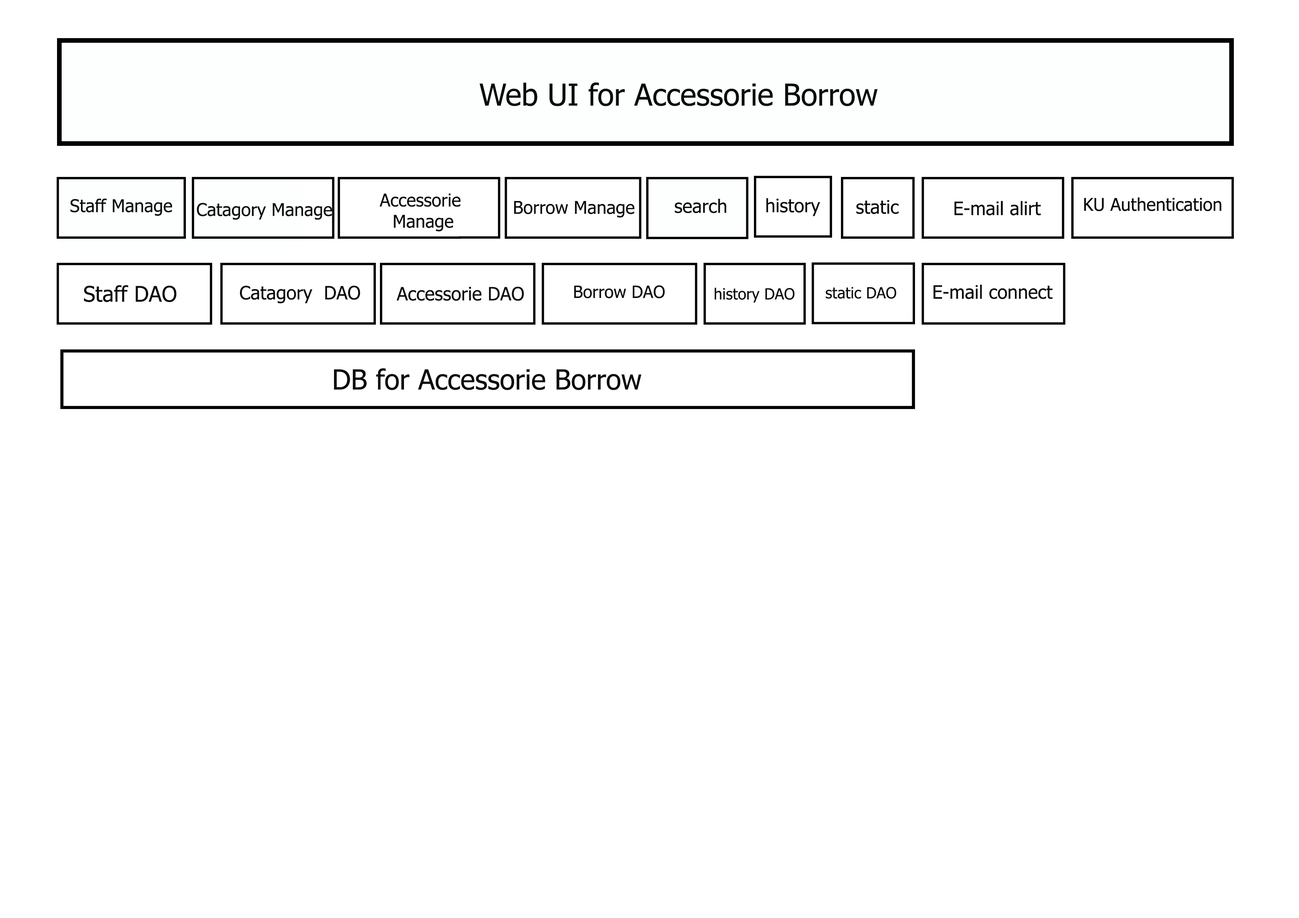
<style>
.page{position:relative;width:1299px;height:918px;background:#ffffff}
.page>*{position:absolute;margin:0}
.t1{font:30.2px "Tahoma";color:#0a0c0c}
.t2{font:17.6px "Tahoma";color:#0a0c0c}
.t3{font:18.5px "Tahoma";color:#0a0c0c}
.t4{font:21.6px "Tahoma";color:#0a0c0c}
.t5{font:4.4px "Tahoma";color:#0a0c0c}
.t6{font:17px "Tahoma";color:#0a0c0c}
.t7{font:15.4px "Tahoma";color:#0a0c0c}
.t8{font:27.8px "Tahoma";color:#0a0c0c}
</style>
<div class="page">
<p class="t1" style="left:479px;top:82px;width:398px;height:24px">Web UI for Accessorie Borrow</p>
<p class="t2" style="left:379px;top:193px;width:82px;height:38px;text-align:center">Accessorie<br> Manage</p>
<p class="t2" style="left:1084px;top:197px;width:137px;height:14px">KU Authentication</p>
<p class="t2" style="left:70px;top:198px;width:102px;height:18px">Staff Manage</p>
<p class="t2" style="left:197px;top:203px;width:135px;height:17px">Catagory Manage</p>
<p class="t2" style="left:514px;top:201px;width:121px;height:17px">Borrow Manage</p>
<p class="t3" style="left:675px;top:199px;width:51px;height:14px">search</p>
<p class="t3" style="left:766px;top:198px;width:54px;height:18px">history</p>
<p class="t3" style="left:856px;top:200px;width:43px;height:14px">static</p>
<p class="t3" style="left:954px;top:201px;width:87px;height:14px">E-mail alirt</p>
<p class="t4" style="left:84px;top:285px;width:93px;height:17px">Staff DAO</p>
<p class="t5" style="left:240px;top:285px;width:120px;height:19px;text-align:center">Catagory  DAO</p>
<p class="t5" style="left:397px;top:287px;width:127px;height:14px;text-align:center">Accessorie DAO</p>
<p class="t6" style="left:574px;top:285px;width:91px;height:13px">Borrow DAO</p>
<p class="t7" style="left:715px;top:288px;width:79px;height:15px">history DAO</p>
<p class="t7" style="left:826px;top:287px;width:70px;height:12px">static DAO</p>
<p class="t3" style="left:933px;top:285px;width:120px;height:14px">E-mail connect</p>
<p class="t8" style="left:334px;top:368px;width:307px;height:22px">DB for Accessorie Borrow</p>
</div>
